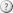
<style>
.page{position:relative;width:13px;height:13px}
.page>*{position:absolute;margin:0}
.t1{font:9.7px "MyriadPro-Regular";color:#777777;font-weight:bold}
</style>
<div class="page">
<p class="t1" style="left:4px;top:3px;width:4px;height:8px">?</p>
</div>
